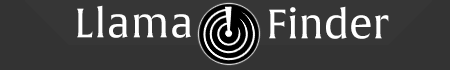
<style>
.page{position:relative;width:450px;height:70px;background:#333333}
.page>*{position:absolute;margin:0}
.t1{font:40px "AlverataPE";letter-spacing:0.02em;color:#ffffff}
.t2{font:40px "AlverataPE";color:#ffffff}
</style>
<div class="page">
<p class="t1" style="left:77px;top:5px;width:114px;height:33px">Llama</p>
<p class="t2" style="left:269px;top:6px;width:120px;height:33px">Finder</p>
</div>
